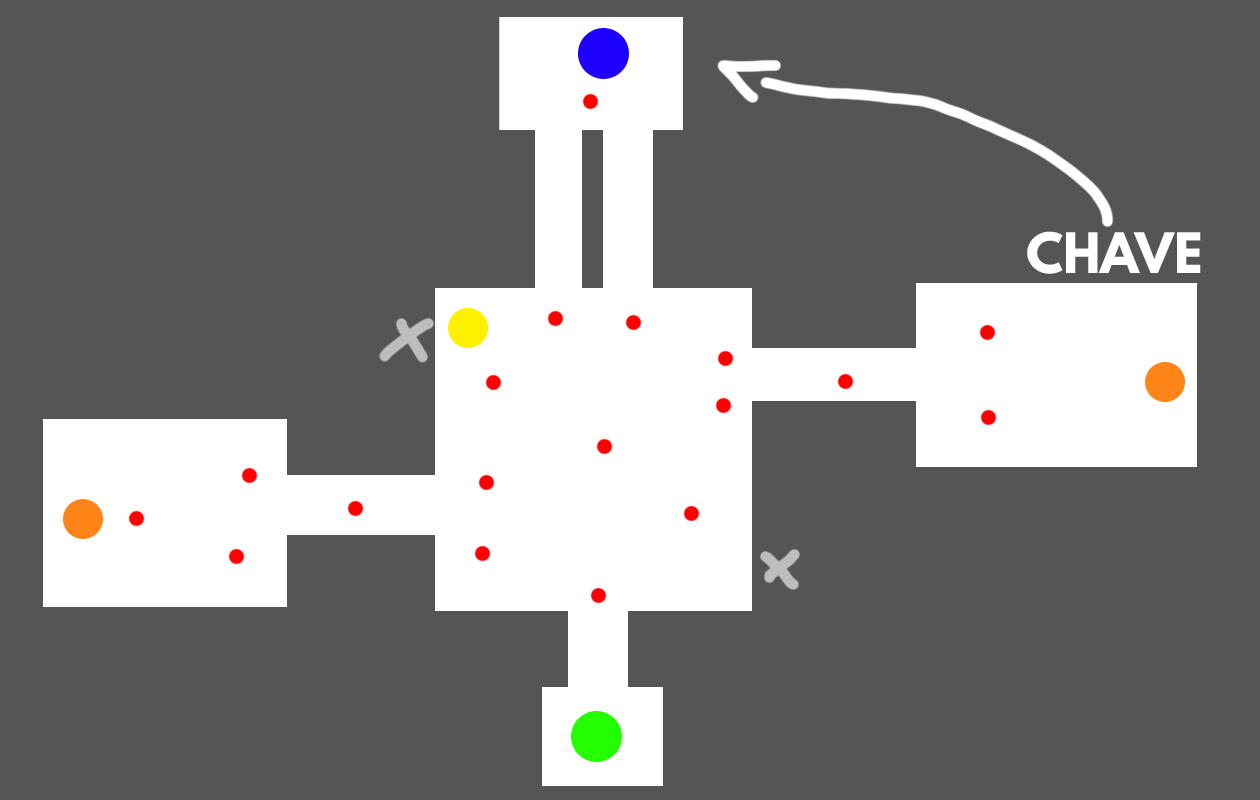
<style>
.page{position:relative;width:1260px;height:800px;background:#555555}
.page>*{position:absolute;margin:0}
.t1{font:49.4px "LeagueSpartan-Bold";color:#ffffff}
</style>
<div class="page">
<p class="t1" style="left:1027px;top:231px;width:174px;height:43px">CHAVE</p>
</div>
